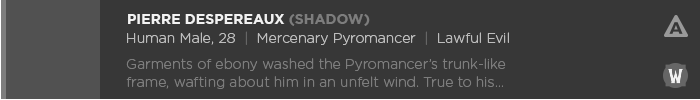
<style>
.page{position:relative;width:700px;height:100px;background:#373737}
.page>*{position:absolute;margin:0}
.t1{font:14px "GothamBold";color:#f2f2f2;text-transform:uppercase}
.t2{font:14px "GothamBold";color:#7d7d7d;text-transform:uppercase}
.t3{font:14px "GothamRounded-Light";color:#bdbdbd}
.t4{font:14px "GothamRounded-Light";color:#666666}
.t5{font:14px/18px "GothamRounded-Light";color:#7d7d7d}
</style>
<div class="page">
<p class="t1" style="left:128px;top:14px;width:242px;height:12px">Pierre Despereaux <span class="t2">(shadow)</span></p>
<p class="t3" style="left:127px;top:31px;width:382px;height:14px">Human Male, 28  <span class="t4">|  </span>Mercenary Pyromancer  <span class="t4">|  </span>Lawful Evil</p>
<p class="t5" style="left:126px;top:58px;width:380px;height:31px">Garments of ebony washed the Pyromancer’s trunk-like frame, wafting about him in an unfelt wind. True to his... nature, fiery aura...</p>
</div>
